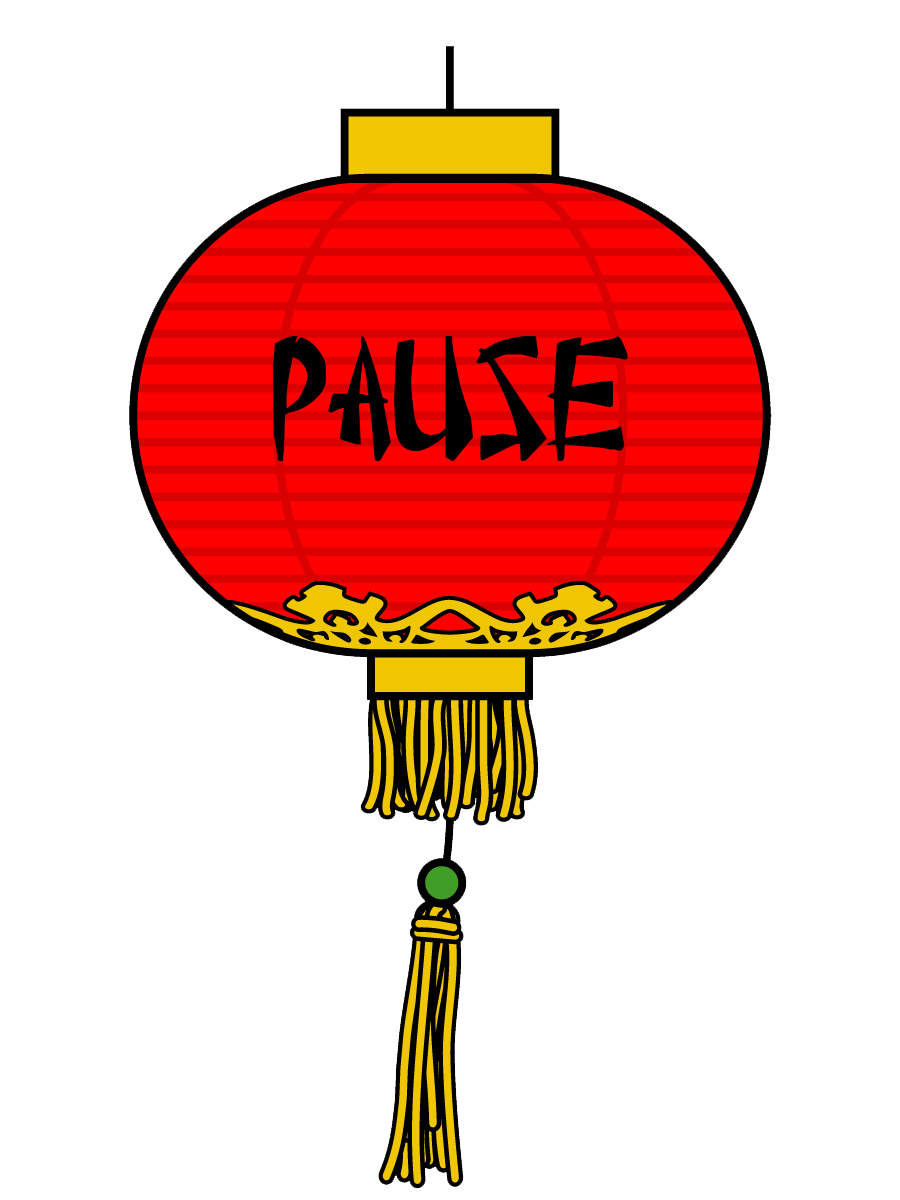
<style>
.page{position:relative;width:900px;height:1200px;background:#ffffff}
.page>*{position:absolute;margin:0}
.t1{font:125px "ChineseTakeaway";color:#000000}
</style>
<div class="page">
<p class="t1" style="left:272px;top:336px;width:356px;height:126px">Pause</p>
</div>
